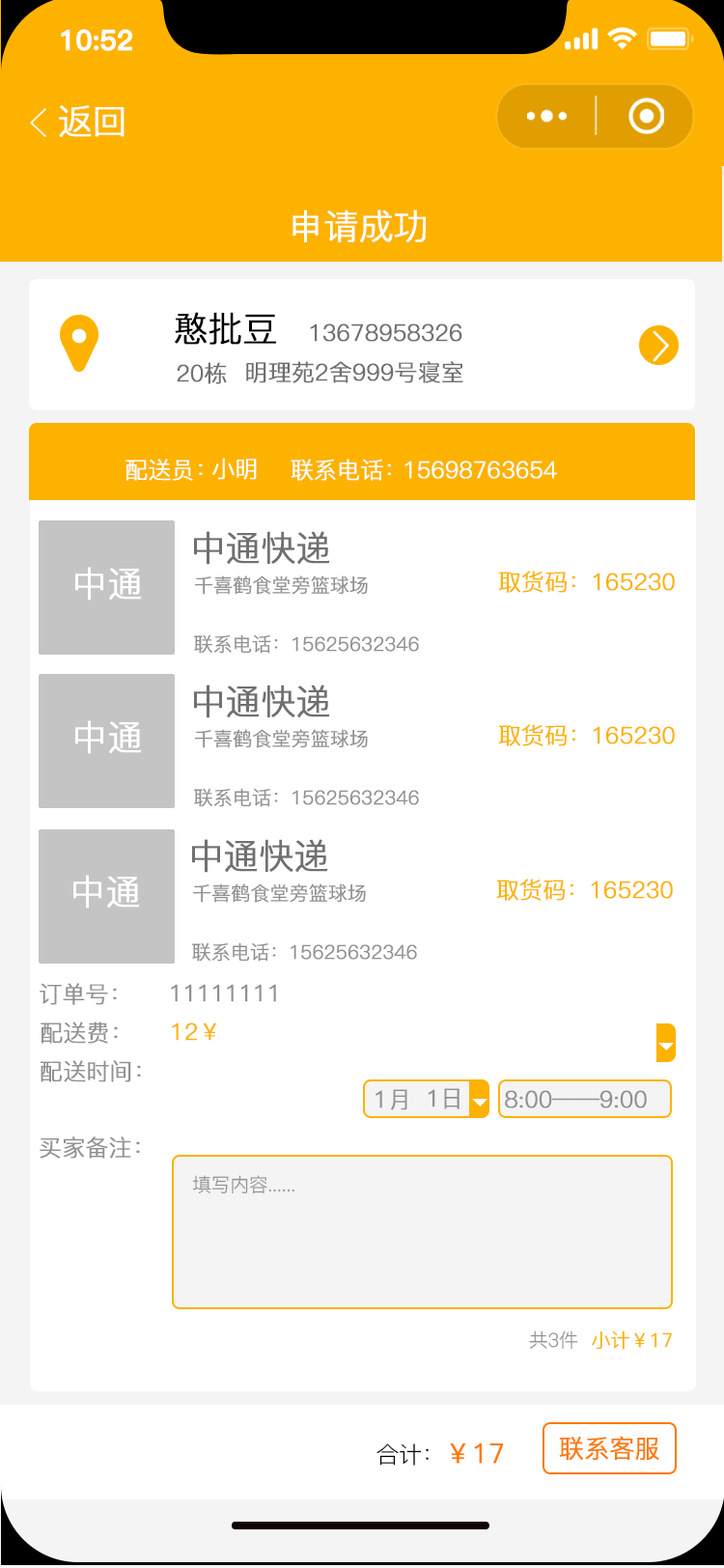
<style>
.page{position:relative;width:724px;height:1568px;background:#ffffff}
.page>*{position:absolute;margin:0}
.t1{font:27.5px "PingFang-SC-Bold";letter-spacing:-0.02em;color:#ffffff;font-weight:bold}
.t2{font:34.8px "PingFang-SC-Regular";letter-spacing:-0.02em;color:#ffffff;font-weight:bold}
.t3{font:34.8px "PingFang-SC-Regular";letter-spacing:-0.02em;color:#000000;font-weight:bold}
.t4{font:23.2px "PingFang-SC-Regular";letter-spacing:-0.02em;color:#707070;font-weight:bold}
.t5{font:23.2px "PingFang-SC-Regular";letter-spacing:-0.02em;color:#ffffff;font-weight:bold}
.t6{font:34.8px "PingFang-SC-Regular";letter-spacing:-0.02em;color:#707070;font-weight:bold}
.t7{font:19.3px "PingFang-SC-Regular";letter-spacing:-0.02em;color:#919191;font-weight:bold}
.t8{font:23.2px "PingFang-SC-Regular";letter-spacing:-0.02em;color:#fdb200;font-weight:bold}
.t9{font:23.2px "PingFang-SC-Regular";letter-spacing:-0.02em;color:#919191;font-weight:bold}
.t10{font:19.3px "PingFang-SC-Regular";letter-spacing:-0.02em;color:#919191}
.t11{font:19.3px "PingFang-SC-Regular";letter-spacing:-0.02em;color:#fdb200;font-weight:bold}
.t12{font:23.2px "PingFang-SC-Regular";letter-spacing:-0.02em;color:#000000}
.t13{font:27px "PingFang-SC-Regular";letter-spacing:-0.02em;color:#ff7900;font-weight:bold}
.t14{font:25.1px "PingFang-SC-Regular";letter-spacing:-0.02em;color:#ff7900;font-weight:bold}
</style>
<div class="page">
<p class="t1" style="left:61px;top:29px;width:71px;height:22px">10:52</p>
<p class="t2" style="left:59px;top:105px;width:66px;height:32px">返回</p>
<p class="t2" style="left:293px;top:210px;width:133px;height:32px">申请成功</p>
<p class="t3" style="left:175px;top:312px;width:101px;height:33px">憨批豆</p>
<p class="t4" style="left:310px;top:323px;width:152px;height:19px">13678958326</p>
<p class="t4" style="left:177px;top:362px;width:50px;height:22px">20栋</p>
<p class="t4" style="left:246px;top:361px;width:217px;height:22px">明理苑2舍999号寝室</p>
<p class="t5" style="left:126px;top:459px;width:77px;height:22px">配送员：</p>
<p class="t5" style="left:212px;top:458px;width:45px;height:22px">小明</p>
<p class="t5" style="left:291px;top:459px;width:100px;height:22px">联系电话：</p>
<p class="t5" style="left:405px;top:461px;width:152px;height:18px">15698763654</p>
<p class="t6" style="left:194px;top:531px;width:136px;height:34px">中通快递</p>
<p class="t2" style="left:75px;top:567px;width:67px;height:34px">中通</p>
<p class="t7" style="left:194px;top:575px;width:174px;height:20px">千喜鹤食堂旁篮球场</p>
<p class="t8" style="left:498px;top:571px;width:177px;height:22px">取货码：165230</p>
<p class="t7" style="left:194px;top:634px;width:225px;height:20px">联系电话：15625632346</p>
<p class="t6" style="left:194px;top:685px;width:136px;height:33px">中通快递</p>
<p class="t2" style="left:75px;top:720px;width:67px;height:34px">中通</p>
<p class="t8" style="left:498px;top:724px;width:177px;height:22px">取货码：165230</p>
<p class="t7" style="left:194px;top:729px;width:174px;height:19px">千喜鹤食堂旁篮球场</p>
<p class="t7" style="left:194px;top:788px;width:225px;height:19px">联系电话：15625632346</p>
<p class="t6" style="left:192px;top:839px;width:136px;height:34px">中通快递</p>
<p class="t2" style="left:73px;top:875px;width:67px;height:34px">中通</p>
<p class="t8" style="left:496px;top:879px;width:177px;height:22px">取货码：165230</p>
<p class="t7" style="left:192px;top:883px;width:174px;height:20px">千喜鹤食堂旁篮球场</p>
<p class="t7" style="left:192px;top:942px;width:225px;height:20px">联系电话：15625632346</p>
<p class="t9" style="left:40px;top:983px;width:77px;height:22px">订单号：</p>
<p class="t9" style="left:171px;top:984px;width:105px;height:18px">11111111</p>
<p class="t9" style="left:41px;top:1022px;width:77px;height:22px">配送费：</p>
<p class="t8" style="left:172px;top:1022px;width:45px;height:19px">12￥</p>
<p class="t9" style="left:40px;top:1060px;width:101px;height:22px">配送时间：</p>
<p class="t9" style="left:376px;top:1089px;width:31px;height:21px">1月</p>
<p class="t9" style="left:428px;top:1088px;width:32px;height:21px">1日</p>
<p class="t9" style="left:505px;top:1090px;width:142px;height:18px">8:00——9:00</p>
<p class="t9" style="left:40px;top:1136px;width:100px;height:23px">买家备注：</p>
<p class="t10" style="left:192px;top:1175px;width:102px;height:19px">填写内容......</p>
<p class="t10" style="left:529px;top:1330px;width:49px;height:20px">共3件</p>
<p class="t11" style="left:592px;top:1330px;width:80px;height:20px">小计￥17</p>
<p class="t12" style="left:377px;top:1443px;width:126px;height:23px">合计：<span class="t13">￥17</span></p>
<p class="t14" style="left:559px;top:1436px;width:100px;height:25px">联系客服</p>
</div>
